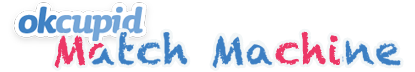
<style>
.page{position:relative;width:415px;height:72px;background:#ffffff}
.page>*{position:absolute;margin:0}
.t1{font:40.7px "Chalkduster";letter-spacing:0.025em}
</style>
<div class="page">
<p class="t1" style="left:54px;top:31px;width:347px;height:37px">Match Machine</p>
</div>
